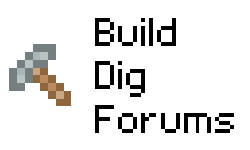
<style>
.page{position:relative;width:250px;height:150px;background:#ffffff}
.page>*{position:absolute;margin:0}
.t1{font:36px "Volter(Goldfish)-Regular";color:#000000;scale:0.97 1}
</style>
<div class="page">
<p class="t1" style="left:95px;top:18px;width:139px;height:115px;text-align:right">Build<br>Dig<br>Forums</p>
</div>
